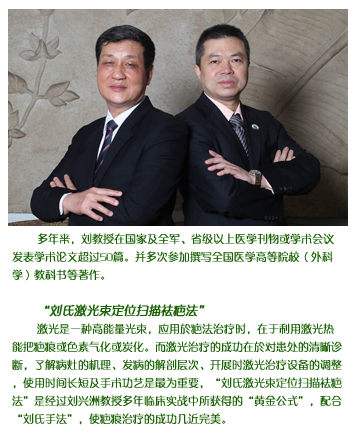
<style>
.page{position:relative;width:357px;height:447px;background:#ffffff}
.page>*{position:absolute;margin:0}
.t1{font:11px/18px "FZZQJW--GB1-0";color:#196003}
.t2{font:12px/18px "FZZQJW--GB1-0";color:#196003;font-weight:bold;font-style:italic}
</style>
<div class="page">
<p class="t1" style="left:12px;top:233px;width:330px;height:192px">多年来，刘教授在国家及全军、省级以上医学刊物或学术会议发表学术论文超过50篇。并多次参加撰写全国医学高等院校（外科学）教科书等著作。<br><br>        <span class="t2">“刘氏激光束定位扫描祛疤法”<br></span>        激光是一种高能量光束，应用於疤法治疗时，在于利用激光热能把疤痕或色素气化或炭化。而激光治疗的成功在於对患处的清晰诊断，了解病灶的机理、发病的解剖层次、开展时激光治疗设备的调整，使用时间长短及手术功艺是最为重要，“刘氏激光束定位扫描祛疤法”是经过刘兴洲教授多年临床实战中所获得的“黄金公式”，配合“刘氏手法”，使疤痕治疗的成功几近完美。</p>
</div>
